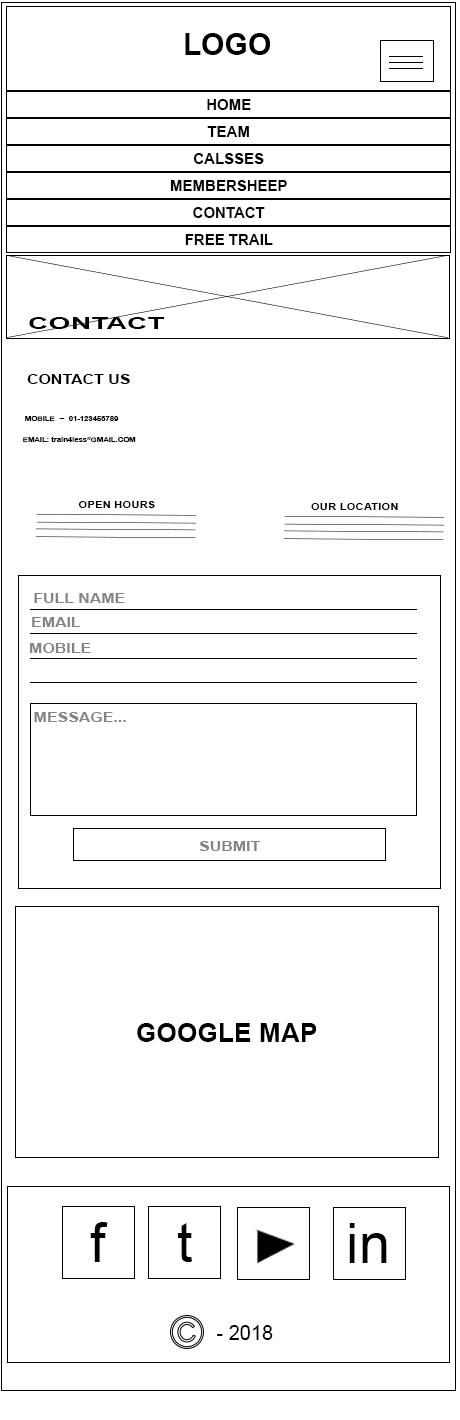
<style>
.page{position:relative;width:460px;height:1420px;background:#ffffff}
.page>*{position:absolute;margin:0}
.t1{font:30px "Arial-BoldMT";color:#000000}
.t2{font:15px "Arial-BoldMT";color:#000000}
.t3{font:15.6px "Arial-BoldMT";color:#000000;scale:1.82 1}
.t4{font:13.2px "Arial-BoldMT";color:#000000;scale:1.21 1}
.t5{font:6.3px "Arial-BoldMT";color:#000000;scale:1.21 1}
.t6{font:9.5px "Arial-BoldMT";color:#000000;scale:1.21 1}
.t7{font:13.2px "Arial-BoldMT";color:#868383;scale:1.21 1}
.t8{font:26.4px "Arial-BoldMT";color:#000000}
.t9{font:55.7px "ArialMT";color:#000000}
.t10{font:20px "ArialMT";color:#000000}
</style>
<div class="page">
<p class="t1" style="left:185px;top:33px;width:86px;height:22px">LOGO</p>
<p class="t2" style="left:207px;top:99px;width:44px;height:11px">HOME</p>
<p class="t2" style="left:207px;top:126px;width:42px;height:11px">TEAM</p>
<p class="t2" style="left:193px;top:153px;width:71px;height:11px">CALSSES</p>
<p class="t2" style="left:170px;top:180px;width:117px;height:11px">MEMBERSHEEP</p>
<p class="t2" style="left:193px;top:207px;width:72px;height:11px">CONTACT</p>
<p class="t2" style="left:185px;top:234px;width:88px;height:11px">FREE TRAIL</p>
<p class="t3" style="left:29px;top:317px;width:135px;height:12px">CONTACT</p>
<p class="t4" style="left:27px;top:374px;width:103px;height:10px">CONTACT US</p>
<p class="t5" style="left:25px;top:416px;width:94px;height:6px">MOBILE<span class="t4"> - </span>01-123456789</p>
<p class="t5" style="left:23px;top:437px;width:113px;height:6px">EMAIL: train4less”GMAIL.COM</p>
<p class="t6" style="left:78px;top:501px;width:77px;height:7px">OPEN HOURS</p>
<p class="t6" style="left:311px;top:503px;width:87px;height:7px">OUR LOCATION</p>
<p class="t7" style="left:34px;top:593px;width:91px;height:10px">FULL NAME</p>
<p class="t7" style="left:32px;top:617px;width:49px;height:10px">EMAIL</p>
<p class="t7" style="left:30px;top:643px;width:61px;height:10px">MOBILE</p>
<p class="t7" style="left:34px;top:712px;width:92px;height:10px">MESSAGE...</p>
<p class="t7" style="left:199px;top:841px;width:62px;height:10px">SUBMIT</p>
<p class="t8" style="left:137px;top:1023px;width:180px;height:19px">GOOGLE MAP</p>
<p class="t9" style="left:90px;top:1222px;width:18px;height:40px">f</p>
<p class="t9" style="left:178px;top:1223px;width:14px;height:39px">t</p>
<p class="t9" style="left:349px;top:1223px;width:38px;height:40px">in</p>
<p class="t10" style="left:217px;top:1325px;width:56px;height:15px">- 2018</p>
</div>
